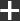
<style>
.page{position:relative;width:20px;height:21px;background:#333333}
.page>*{position:absolute;margin:0}
.t1{font:40px "ArialMT";color:#ffffff}
</style>
<div class="page">
<p class="t1" style="left:0px;top:1px;width:20px;height:19px">+</p>
</div>
